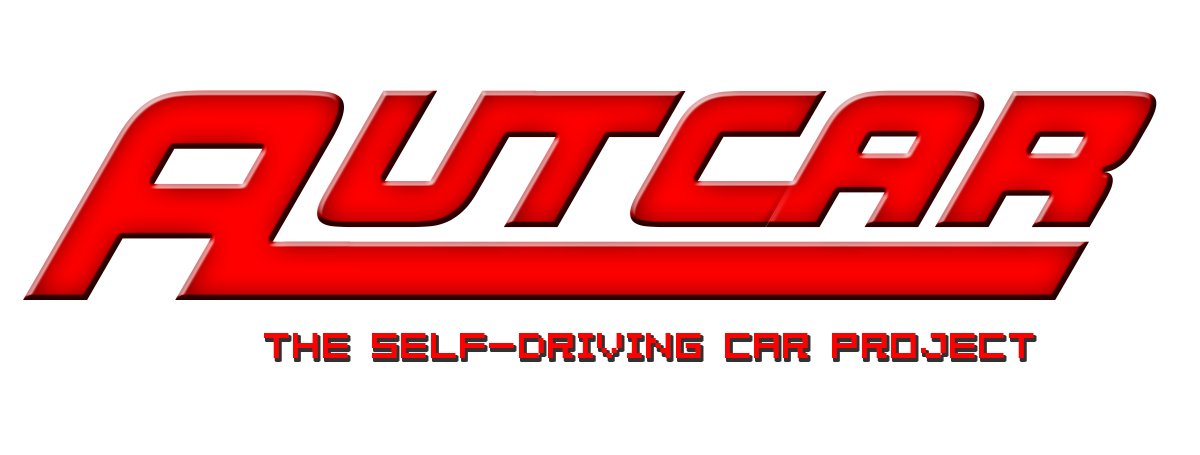
<style>
.page{position:relative;width:1200px;height:455px;background:#ffffff}
.page>*{position:absolute;margin:0}
.t1{font:299.1px "HaulageCommercialW00-BoldIt"}
.t2{font:39.9px "04b08";color:#fd0000}
</style>
<div class="page">
<p class="t1" style="left:23px;top:90px;width:1134px;height:210px">Autcar</p>
<p class="t2" style="left:264px;top:333px;width:770px;height:25px">The self-driving car project</p>
</div>
